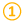
<style>
.page{position:relative;width:24px;height:24px;background:#ffffff}
.page>*{position:absolute;margin:0}
.t1{font:15.9px "Calibri-BoldItalic";color:#ffb100}
</style>
<div class="page">
<p class="t1" style="left:3px;top:2px;width:19px;height:19px">①</p>
</div>
